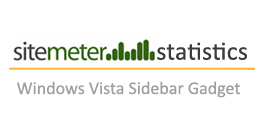
<style>
.page{position:relative;width:260px;height:140px;background:#ffffff}
.page>*{position:absolute;margin:0}
.t1{font:26px "Calibri";letter-spacing:0.01em;color:#3c3c3c}
.t2{font:18px "Calibri";color:#9f9f9f}
</style>
<div class="page">
<p class="t1" style="left:157px;top:42px;width:90px;height:18px">statistics</p>
<p class="t2" style="left:17px;top:81px;width:223px;height:17px">Windows Vista Sidebar Gadget</p>
</div>
